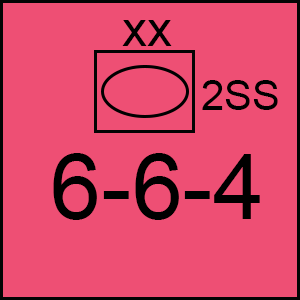
<style>
.page{position:relative;width:300px;height:300px;background:#ee4f74}
.page>*{position:absolute;margin:0}
.t1{font:50px "ArialMT";color:#000000}
.t2{font:41.7px "ArialMT";color:#000000}
.t3{font:91.7px "ArialMT";color:#000000}
</style>
<div class="page">
<p class="t1" style="left:122px;top:20px;width:50px;height:26px">xx</p>
<p class="t2" style="left:202px;top:80px;width:76px;height:30px">2SS</p>
<p class="t3" style="left:53px;top:153px;width:207px;height:67px">6-6-4</p>
</div>
